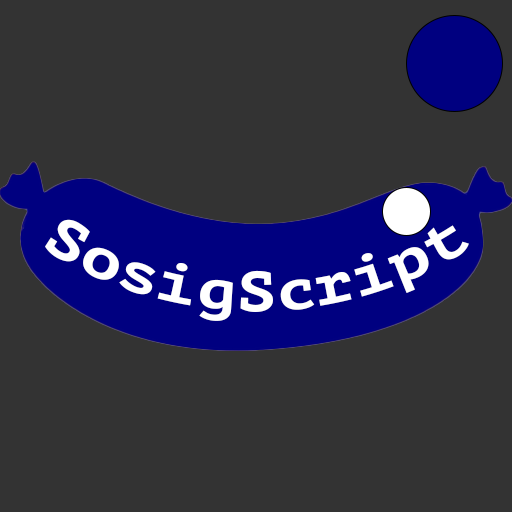
<style>
.page{position:relative;width:512px;height:512px;background:#333333}
.page>*{position:absolute;margin:0}
.t1{font:56.4px "PTMono-Bold";color:#ffffff}
</style>
<div class="page">
<p class="t1" style="left:45px;top:219px;width:424px;height:102px;text-align:center">SosigScript</p>
</div>
